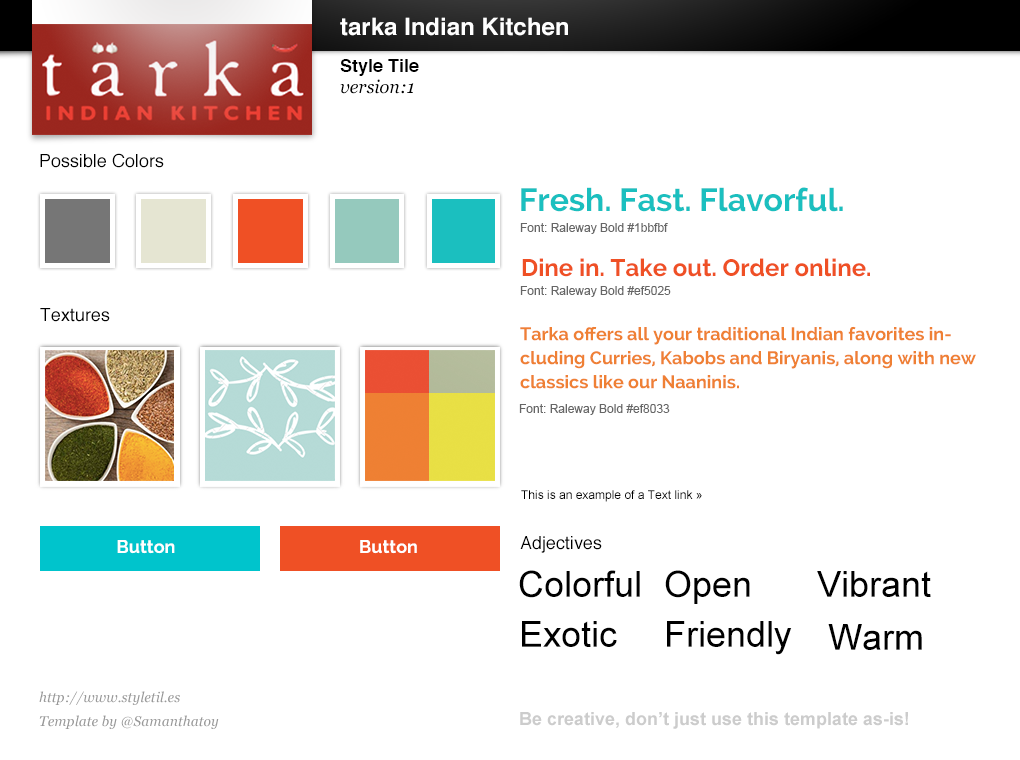
<style>
.page{position:relative;width:1020px;height:760px;background:#ffffff}
.page>*{position:absolute;margin:0}
.t1{font:24px "Helvetica-Bold";color:#ffffff}
.t2{font:18px "Helvetica-Bold";color:#000000}
.t3{font:18px "Georgia-Italic";color:#000000}
.t4{font:18px "Helvetica";color:#000000}
.t5{font:32px "Raleway-Bold";color:#1bbfbf}
.t6{font:12px "ArialMT";color:#666666}
.t7{font:24px "Raleway-Bold";color:#ef5025}
.t8{font:18px/24px "Raleway-Bold";color:#ef8034}
.t9{font:12px "ArialMT";color:#000000}
.t10{font:18px "Raleway-Bold";color:#ffffff}
.t11{font:36px "ArialMT";color:#000000}
.t12{font:14px/24px "Georgia-Italic";color:#999999}
.t13{font:18px "Arial-BoldMT";color:#cccccc}
</style>
<div class="page">
<p class="t1" style="left:340px;top:17px;width:228px;height:19px">tarka Indian Kitchen</p>
<p class="t2" style="left:340px;top:59px;width:79px;height:17px">Style Tile</p>
<p class="t3" style="left:340px;top:79px;width:74px;height:15px">version:1</p>
<p class="t4" style="left:40px;top:153px;width:124px;height:15px">Possible Colors</p>
<p class="t5" style="left:521px;top:187px;width:322px;height:25px">Fresh. Fast. Flavorful.</p>
<p class="t6" style="left:520px;top:223px;width:148px;height:11px">Font: Raleway Bold #1bbfbf</p>
<p class="t7" style="left:522px;top:258px;width:348px;height:19px">Dine in. Take out. Order online.</p>
<p class="t6" style="left:520px;top:286px;width:151px;height:11px">Font: Raleway Bold #ef5025</p>
<p class="t4" style="left:40px;top:308px;width:70px;height:14px">Textures</p>
<p class="t8" style="left:520px;top:326px;width:456px;height:63px">Tarka offers all your traditional Indian favorites including Curries, Kabobs and Biryanis, along with new classics like our Naaninis.</p>
<p class="t6" style="left:519px;top:404px;width:151px;height:11px">Font: Raleway Bold #ef8033</p>
<p class="t9" style="left:521px;top:490px;width:181px;height:12px">This is an example of a Text link »</p>
<p class="t10" style="left:117px;top:540px;width:58px;height:14px">Button</p>
<p class="t10" style="left:360px;top:540px;width:57px;height:14px">Button</p>
<p class="t4" style="left:520px;top:536px;width:82px;height:17px">Adjectives</p>
<p class="t11" style="left:519px;top:570px;width:121px;height:28px">Colorful</p>
<p class="t11" style="left:665px;top:570px;width:85px;height:34px">Open</p>
<p class="t11" style="left:817px;top:571px;width:114px;height:26px">Vibrant</p>
<p class="t11" style="left:522px;top:621px;width:95px;height:26px">Exotic</p>
<p class="t11" style="left:667px;top:621px;width:125px;height:34px">Friendly</p>
<p class="t11" style="left:828px;top:624px;width:94px;height:26px">Warm</p>
<p class="t12" style="left:39px;top:691px;width:180px;height:38px">http://www.styletil.es<br>Template by @Samanthatoy</p>
<p class="t13" style="left:520px;top:712px;width:388px;height:17px">Be creative, don’t just use this template as-is!</p>
</div>
